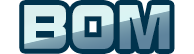
<style>
.page{position:relative;width:194px;height:54px;background:#00334d}
.page>*{position:absolute;margin:0}
.t1{font:69.3px "DFSoGeiStd-W9";scale:0.92 1}
</style>
<div class="page">
<p class="t1" style="left:24px;top:5px;width:146px;height:44px">BOM</p>
</div>
